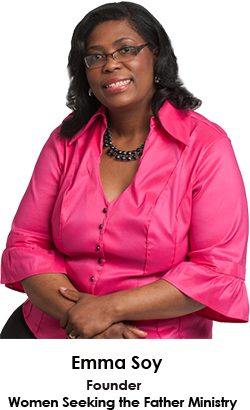
<style>
.page{position:relative;width:250px;height:410px;background:#ffffff}
.page>*{position:absolute;margin:0}
.t1{font:18px "CenturyGothic-Bold";color:#070000}
.t2{font:14px "CenturyGothic-Bold";color:#1a1615}
.t3{font:13.7px "CenturyGothic-Bold";color:#060606}
</style>
<div class="page">
<p class="t1" style="left:72px;top:356px;width:91px;height:17px">Emma Soy</p>
<p class="t2" style="left:87px;top:380px;width:55px;height:10px">Founder</p>
<p class="t3" style="left:8px;top:397px;width:230px;height:13px">Women Seeking the Father Ministry</p>
</div>
